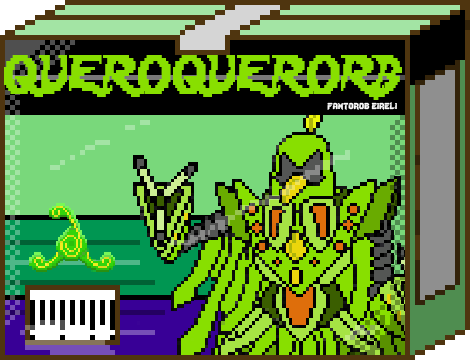
<style>
.page{position:relative;width:470px;height:360px}
.page>*{position:absolute;margin:0}
.t1{font:48px "Lady-Radical";color:#88df00;scale:0.72 1}
.t2{font:12px "Lady-Radical";color:#fbfbfb}
</style>
<div class="page">
<p class="t1" style="left:4px;top:55px;width:398px;height:45px">QUEROQUERORB</p>
<p class="t2" style="left:327px;top:102px;width:70px;height:8px">fantorob eireli</p>
</div>
